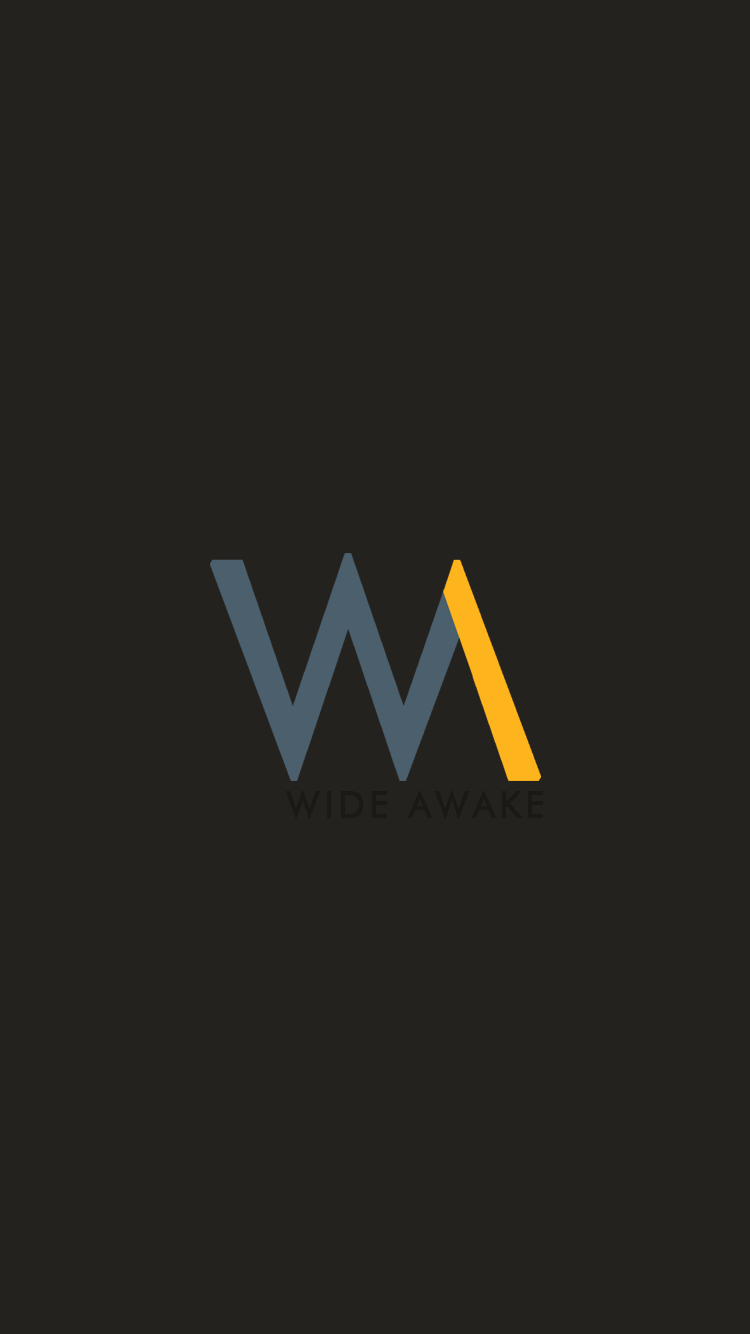
<style>
.page{position:relative;width:750px;height:1334px;background:#24221f}
.page>*{position:absolute;margin:0}
.t1{font:36.3px "FuturaBT-Book";letter-spacing:0.1em;color:#1a1916;font-weight:bold}
</style>
<div class="page">
<p class="t1" style="left:286px;top:791px;width:257px;height:27px">WIDE AWAKE</p>
</div>
